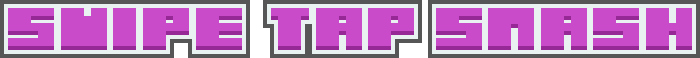
<style>
.page{position:relative;width:700px;height:58px;background:#ca4bc9}
.page>*{position:absolute;margin:0}
.t1{font:60px "Arkadeland";color:#ca4bc9}
</style>
<div class="page">
<p class="t1" style="left:8px;top:12px;width:684px;height:38px">SWIPE TAP SMASH</p>
<p class="t1" style="left:8px;top:8px;width:684px;height:38px">SWIPE TAP SMASH</p>
</div>
